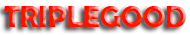
<style>
.page{position:relative;width:190px;height:35px;background:#ffffff}
.page>*{position:absolute;margin:0}
.t1{font:29.6px "BerlinSansFBDemi-Bold"}
</style>
<div class="page">
<p class="t1" style="left:4px;top:6px;width:182px;height:21px">TRIPLEGOOD</p>
</div>
